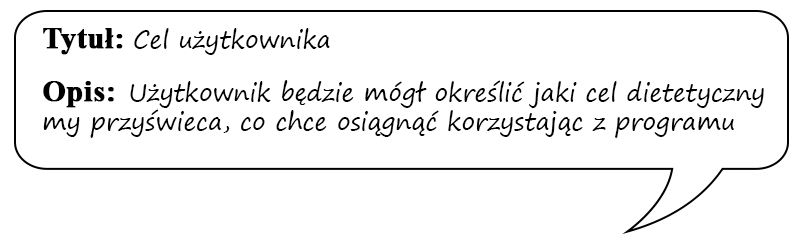
<style>
.page{position:relative;width:800px;height:242px;background:#ffffff}
.page>*{position:absolute;margin:0}
.t1{font:24px "SegoePrint";color:#000000}
.t2{font:30px "TimesNewRomanPS-BoldMT";color:#000000;font-weight:bold}
</style>
<div class="page">
<p class="t1" style="left:43px;top:28px;width:721px;height:110px"><span class="t2">Tytuł: </span>Cel użytkownika<br><br><span class="t2">Opis:  </span>Użytkownik będzie mógł określić jaki cel dietetyczny my przyświeca, co chce osiągnąć korzystając z programu</p>
</div>
